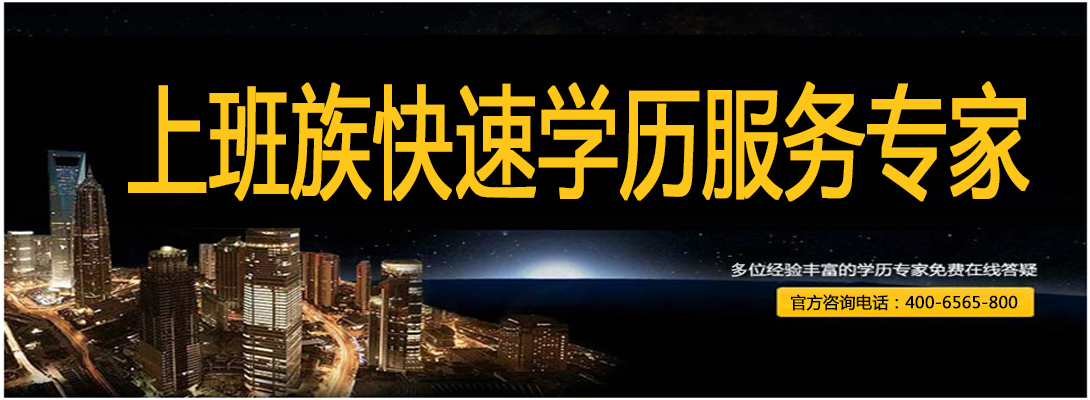
<style>
.page{position:relative;width:1090px;height:400px;background:#010101}
.page>*{position:absolute;margin:0}
.t1{font:120px "MicrosoftYaHei";color:#fdc619;font-weight:bold;scale:0.67 1}
.t2{font:15px "SimHei";color:#d5d9da;font-weight:bold;scale:1.2 1}
.t3{font:16px "MicrosoftYaHei";color:#000000;font-weight:bold}
</style>
<div class="page">
<p class="t1" style="left:128px;top:81px;width:902px;height:121px">上班族快速学历服务专家</p>
<p class="t2" style="left:731px;top:262px;width:16px;height:15px">多</p>
<p class="t3" style="left:791px;top:294px;width:227px;height:17px">官方咨询电话：400-6565-800</p>
</div>
